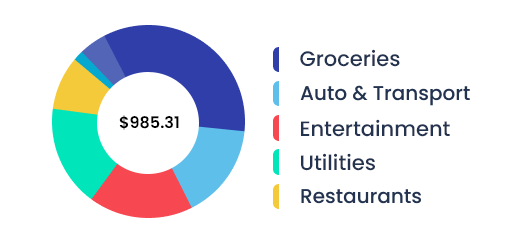
<style>
.page{position:relative;width:513px;height:238px;background:#ffffff}
.page>*{position:absolute;margin:0}
.t1{font:21px "Poppins-Medium";color:#233350}
.t2{font:16px "Poppins-SemiBold";color:#000000}
</style>
<div class="page">
<p class="t1" style="left:300px;top:49px;width:100px;height:18px">Groceries</p>
<p class="t2" style="left:119px;top:115px;width:60px;height:15px">$985.31</p>
<p class="t1" style="left:301px;top:119px;width:149px;height:18px">Entertainment</p>
<p class="t1" style="left:301px;top:153px;width:74px;height:18px">Utilities</p>
</div>
